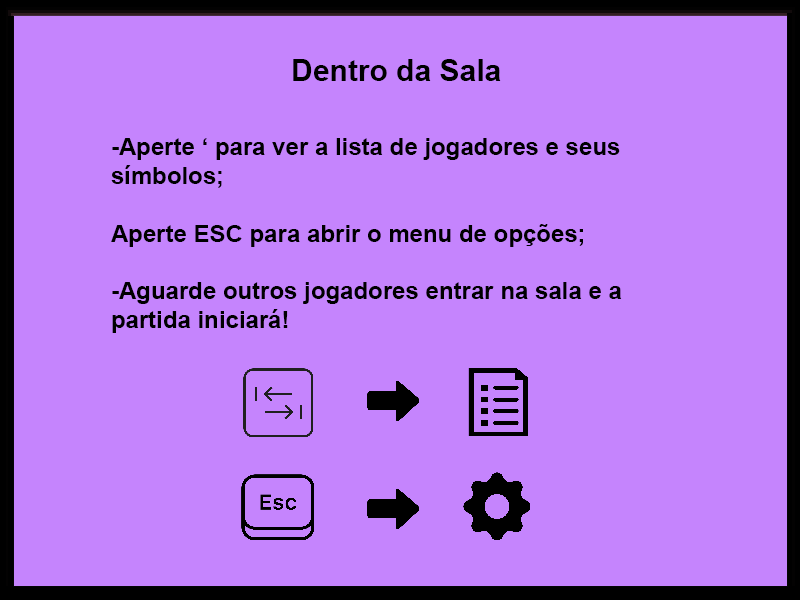
<style>
.page{position:relative;width:800px;height:600px;background:#c584fd}
.page>*{position:absolute;margin:0}
.t1{font:30px "Arial-BoldMT";color:#000000}
.t2{font:24px "Arial-BoldMT";color:#000000}
</style>
<div class="page">
<p class="t1" style="left:293px;top:59px;width:208px;height:22px">Dentro da Sala</p>
<p class="t2" style="left:111px;top:138px;width:511px;height:195px">-Aperte ‘ para ver a lista de jogadores e seus símbolos;<br><br>Aperte ESC para abrir o menu de opções;<br><br>-Aguarde outros jogadores entrar na sala e a partida iniciará!</p>
</div>
